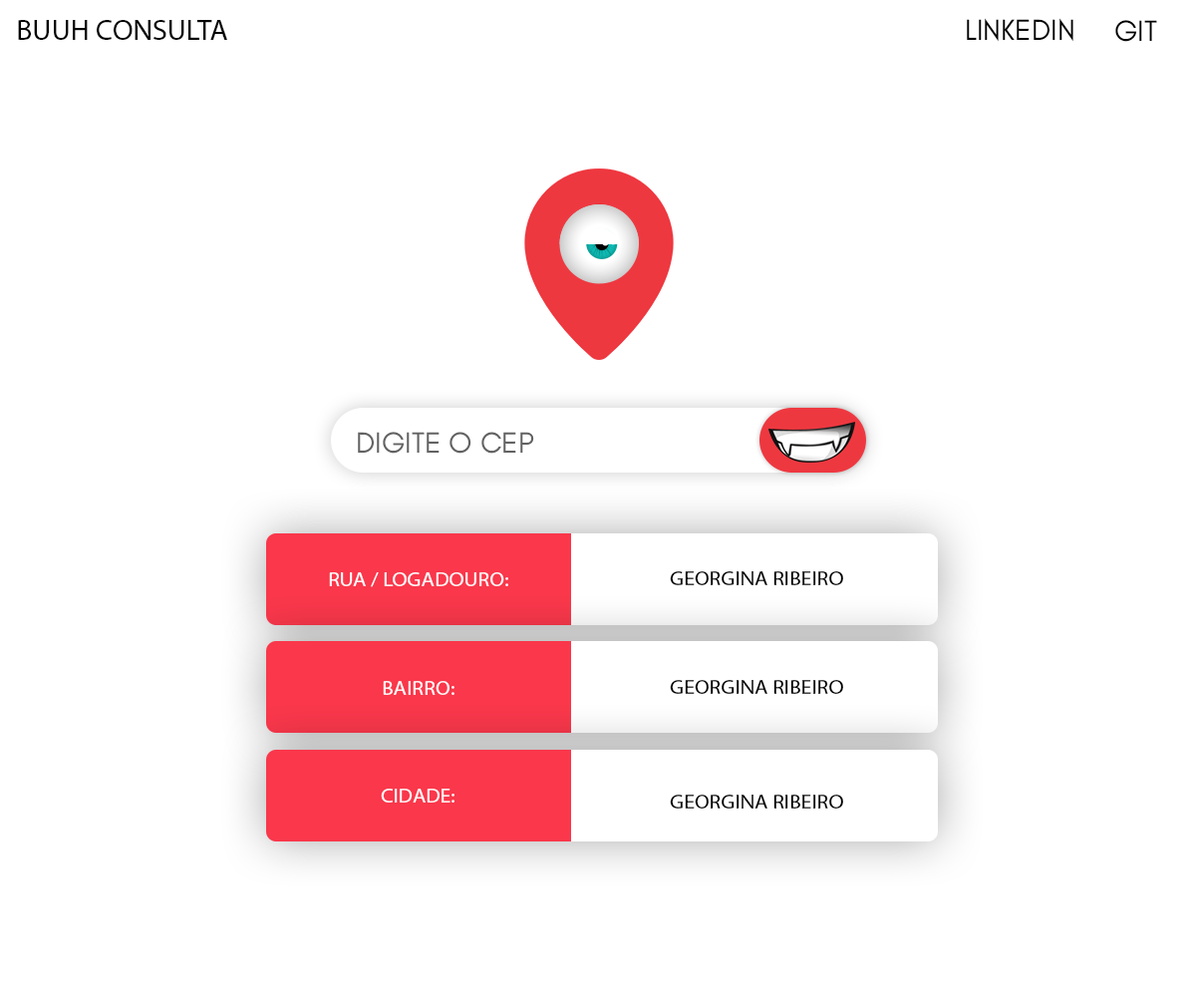
<style>
.page{position:relative;width:1196px;height:997px;background:#ffffff}
.page>*{position:absolute;margin:0}
.t1{font:29.6px "GlacialIndifference-Regular";color:#000000;text-transform:uppercase}
.t2{font:29.6px "MyriadPro-Regular";color:#000000;text-transform:uppercase}
.t3{font:29.6px "GlacialIndifference-Regular";color:#626262;text-transform:uppercase}
.t4{font:19.4px "MyriadPro-Regular";color:#ffffff;text-transform:uppercase;scale:1.12 1}
.t5{font:19.4px "MyriadPro-Regular";color:#000000;text-transform:uppercase;scale:1.12 1}
</style>
<div class="page">
<p class="t1" style="left:967px;top:18px;width:107px;height:24px">linkedin</p>
<p class="t2" style="left:18px;top:20px;width:209px;height:20px">buuh consulta</p>
<p class="t1" style="left:1115px;top:20px;width:42px;height:22px">git</p>
<p class="t3" style="left:358px;top:432px;width:176px;height:22px">dIGITE O CEP</p>
<p class="t4" style="left:329px;top:572px;width:179px;height:15px">RUA / LOGADOURO:</p>
<p class="t5" style="left:670px;top:571px;width:173px;height:14px">Georgina ribeiro</p>
<p class="t4" style="left:383px;top:681px;width:72px;height:14px">BAIRRO:</p>
<p class="t5" style="left:670px;top:680px;width:173px;height:14px">Georgina ribeiro</p>
<p class="t4" style="left:381px;top:789px;width:74px;height:13px">CIDADE:</p>
<p class="t5" style="left:670px;top:794px;width:173px;height:14px">Georgina ribeiro</p>
</div>
